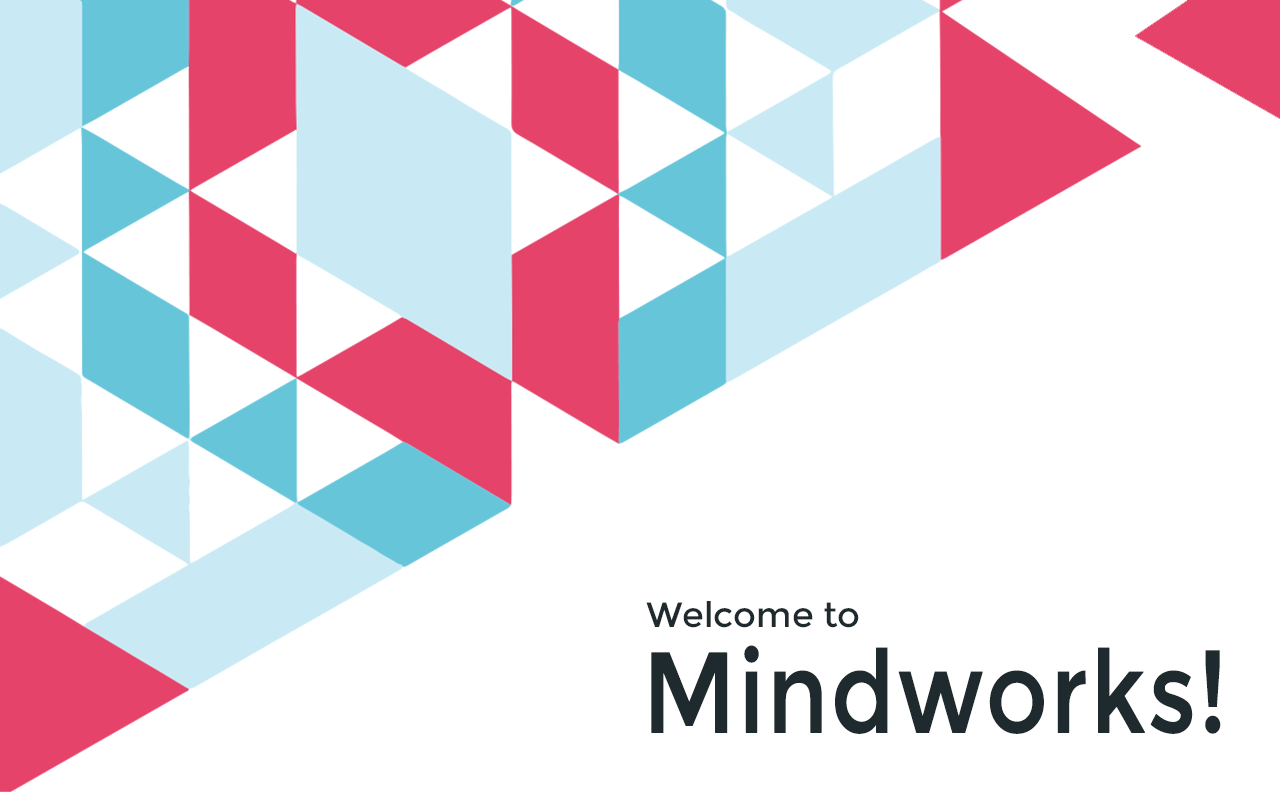
<style>
.page{position:relative;width:1280px;height:800px;background:#ffffff}
.page>*{position:absolute;margin:0}
.t1{font:35px "Montserrat-Regular";color:#1e2a2e}
.t2{font:114px "Montserrat-Regular";color:#1e2a2e;font-weight:bold;scale:0.83 1}
</style>
<div class="page">
<p class="t1" style="left:646px;top:601px;width:213px;height:27px">Welcome to</p>
<p class="t2" style="left:651px;top:645px;width:570px;height:89px">Mindworks!</p>
</div>
